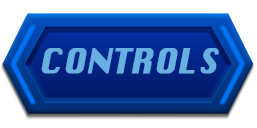
<style>
.page{position:relative;width:257px;height:128px;background:#ffffff}
.page>*{position:absolute;margin:0}
.t1{font:33.7px "Silom";color:#67b0e1;font-weight:bold;font-style:italic}
</style>
<div class="page">
<p class="t1" style="left:41px;top:48px;width:178px;height:26px">CONTROLS</p>
</div>
